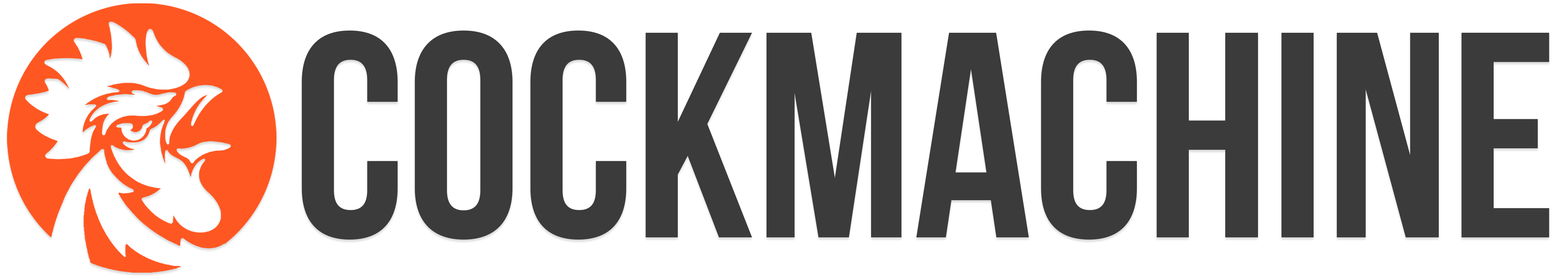
<style>
.page{position:relative;width:1568px;height:276px;background:#ffffff}
.page>*{position:absolute;margin:0}
.t1{font:292.2px "BebasNeueBold";color:#3b3b3b}
</style>
<div class="page">
<p class="t1" style="left:302px;top:30px;width:1247px;height:210px">COCKMACHINE</p>
</div>
